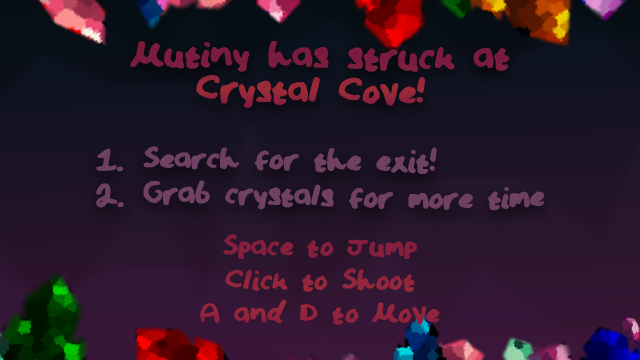
<style>
.page{position:relative;width:640px;height:360px}
.page>*{position:absolute;margin:0}
.t1{font:43.8px/35px "Crystal";color:#7c1d3e}
.t2{font:36px/36px "Crystal";color:#7c486e}
.t3{font:33.6px/33.6px "Crystal";color:#90233c}
</style>
<div class="page">
<p class="t1" style="left:130px;top:41px;width:380px;height:67px;text-align:center">Mutiny has struck at<br>Crystal Cove!</p>
<p class="t2" style="left:96px;top:146px;width:449px;height:65px">Search for the exit!<br>Grab crystals for more time</p>
<p class="t3" style="left:200px;top:234px;width:240px;height:91px;text-align:center">Space to Jump<br>Click to Shoot<br>A and D to Move</p>
</div>
